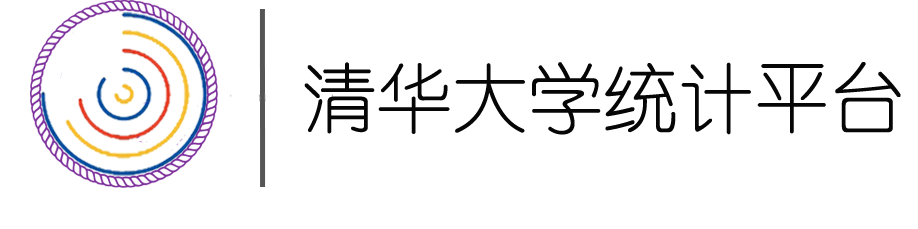
<style>
.page{position:relative;width:918px;height:229px;background:#ffffff}
.page>*{position:absolute;margin:0}
.t1{font:75.5px "YouYuan";color:#060606}
</style>
<div class="page">
<p class="t1" style="left:304px;top:62px;width:597px;height:73px">清华大学统计平台</p>
</div>
